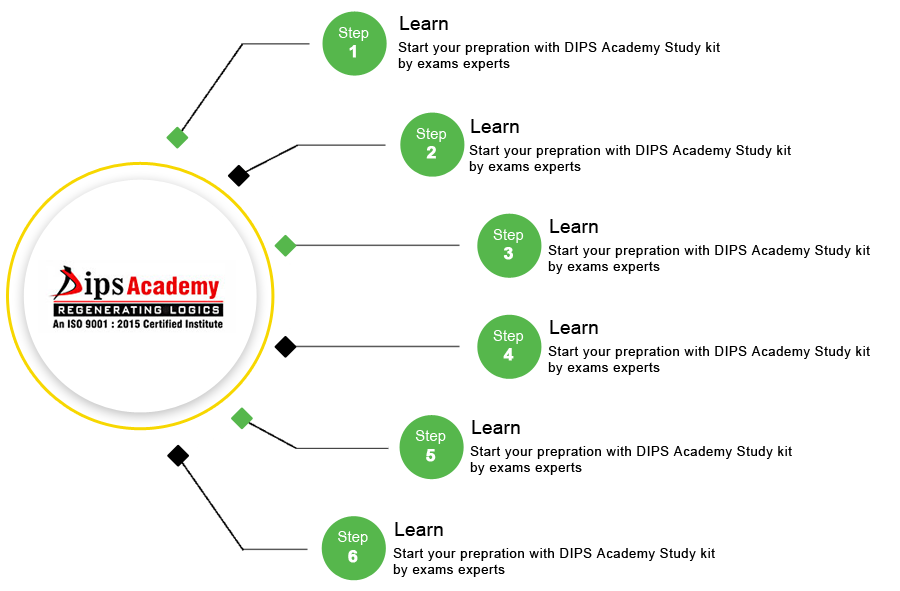
<style>
.page{position:relative;width:900px;height:591px;background:#ffffff}
.page>*{position:absolute;margin:0}
.t1{font:18.5px "ArialMT";letter-spacing:0.025em;color:#000000}
.t2{font:16.2px "ArialNarrow";color:#ffffff;scale:1.13 1}
.t3{font:16.2px "Arial-BoldMT";color:#ffffff;font-weight:bold;scale:1.13 1}
.t4{font:13px "ArialMT";letter-spacing:0.05em;color:#000000}
</style>
<div class="page">
<p class="t1" style="left:400px;top:16px;width:48px;height:14px">Learn</p>
<p class="t2" style="left:338px;top:27px;width:31px;height:31px;text-align:center">Step<br><span class="t3">1</span></p>
<p class="t4" style="left:398px;top:42px;width:322px;height:29px">Start your prepration with DIPS Academy Study kit<br>by exams experts</p>
<p class="t1" style="left:471px;top:119px;width:48px;height:14px">Learn</p>
<p class="t2" style="left:416px;top:128px;width:31px;height:31px;text-align:center">Step<br><span class="t3">2</span></p>
<p class="t4" style="left:469px;top:145px;width:322px;height:29px">Start your prepration with DIPS Academy Study kit<br>by exams experts</p>
<p class="t1" style="left:550px;top:219px;width:48px;height:14px">Learn</p>
<p class="t2" style="left:493px;top:229px;width:31px;height:31px;text-align:center">Step<br><span class="t3">3</span></p>
<p class="t4" style="left:548px;top:245px;width:322px;height:29px">Start your prepration with DIPS Academy Study kit<br>by exams experts</p>
<p class="t1" style="left:550px;top:320px;width:48px;height:14px">Learn</p>
<p class="t2" style="left:493px;top:330px;width:31px;height:31px;text-align:center">Step<br><span class="t3">4</span></p>
<p class="t4" style="left:548px;top:346px;width:322px;height:29px">Start your prepration with DIPS Academy Study kit<br>by exams experts</p>
<p class="t1" style="left:472px;top:420px;width:48px;height:14px">Learn</p>
<p class="t2" style="left:415px;top:430px;width:31px;height:32px;text-align:center">Step<br><span class="t3">5</span></p>
<p class="t4" style="left:470px;top:446px;width:322px;height:29px">Start your prepration with DIPS Academy Study kit<br>by exams experts</p>
<p class="t2" style="left:338px;top:531px;width:30px;height:32px;text-align:center">Step<br><span class="t3">6</span></p>
<p class="t1" style="left:395px;top:522px;width:48px;height:14px">Learn</p>
<p class="t4" style="left:393px;top:548px;width:322px;height:29px">Start your prepration with DIPS Academy Study kit<br>by exams experts</p>
</div>
